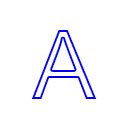
<style>
.page{position:relative;width:128px;height:128px;background:#ffffff}
.page>*{position:absolute;margin:0}
.t1{font:96px "ArialMT"}
</style>
<div class="page">
<p class="t1" style="left:31px;top:30px;width:66px;height:69px">A</p>
</div>
